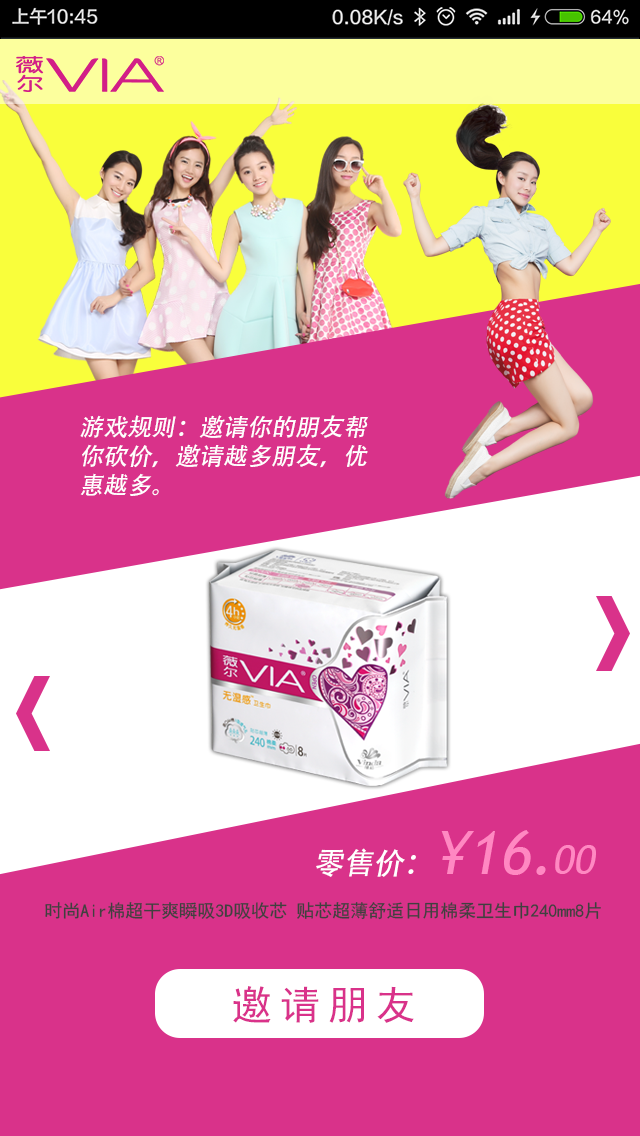
<style>
.page{position:relative;width:640px;height:1136px;background:#d9328a}
.page>*{position:absolute;margin:0}
.t1{font:24px "AdobeHeitiStd-Regular";color:#ffffff;font-style:italic}
.t2{font:30px "AdobeHeitiStd-Regular";color:#ffffff;font-style:italic}
.t3{font:60px "TrebuchetMS";color:#ff88c2;font-style:italic}
.t4{font:40px "TrebuchetMS";color:#ff88c2;font-style:italic}
.t5{font:18px "SimHei";color:#404040}
.t6{font:40px "SimHei";letter-spacing:0.2em;color:#d9328a}
</style>
<div class="page">
<p class="t1" style="left:80px;top:415px;width:289px;height:81px">游戏规则：邀请你的朋友帮你砍价，邀请越多朋友，优惠越多。</p>
<p class="t2" style="left:316px;top:830px;width:280px;height:47px">零售价：<span class="t3">¥16.</span><span class="t4">00</span></p>
<p class="t5" style="left:45px;top:902px;width:556px;height:18px">时尚Air棉超干爽瞬吸3D吸收芯 贴芯超薄舒适日用棉柔卫生巾240mm8片</p>
<p class="t6" style="left:233px;top:986px;width:181px;height:37px">邀请朋友</p>
</div>
